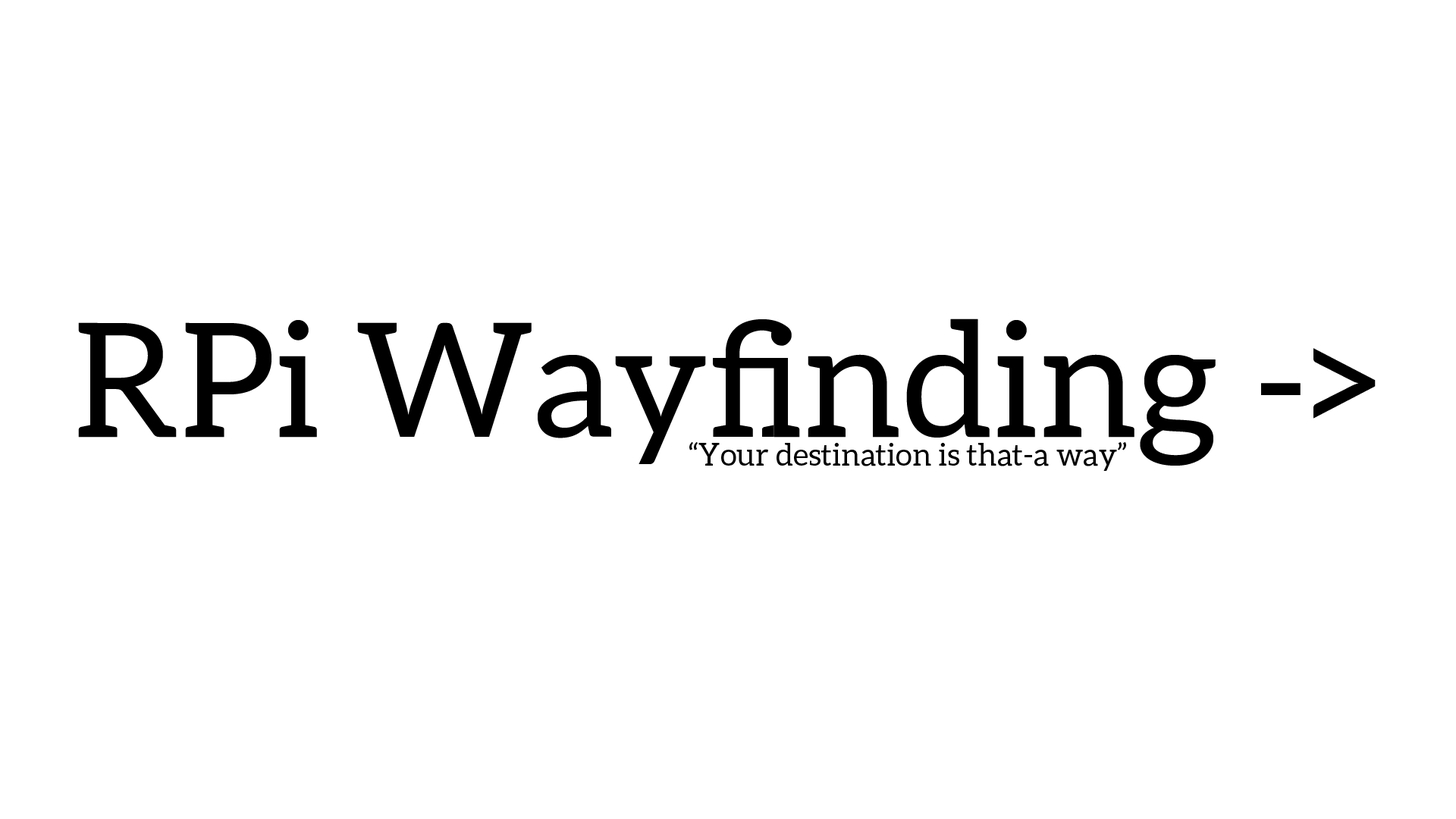
<style>
.page{position:relative;width:1456px;height:819px;background:#ffffff}
.page>*{position:absolute;margin:0}
.t1{font:159.2px "Aleo-Regular";color:#000000}
.t2{font:31px "Aleo-Regular";color:#000000}
</style>
<div class="page">
<p class="t1" style="left:78px;top:318px;width:1298px;height:148px">RPi Wayfinding -&gt;</p>
<p class="t2" style="left:689px;top:442px;width:437px;height:29px">“Your destination is that-a way”</p>
</div>
